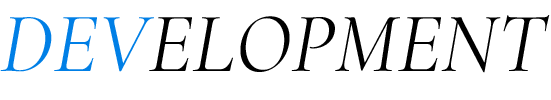
<style>
.page{position:relative;width:551px;height:100px;background:#ffffff}
.page>*{position:absolute;margin:0}
.t1{font:86px "Cormorant-Italic";color:#000000;text-transform:uppercase}
.t2{font:86px "Cormorant-Italic";color:#007fe6;text-transform:uppercase}
</style>
<div class="page">
<p class="t1" style="left:0px;top:15px;width:550px;height:58px"><span class="t2">DEV</span>ELOPMENT</p>
</div>
